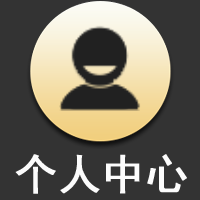
<style>
.page{position:relative;width:200px;height:200px;background:#333333}
.page>*{position:absolute;margin:0}
.t1{font:42.3px "SimHei";color:#fcfcfc;font-weight:bold}
</style>
<div class="page">
<p class="t1" style="left:15px;top:154px;width:172px;height:40px">个人中心</p>
</div>
